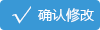
<style>
.page{position:relative;width:100px;height:30px;background:#3998d6}
.page>*{position:absolute;margin:0}
.t1{font:20px "AdobeHeitiStd-Regular";color:#ffffff}
.t2{font:14px "MicrosoftYaHei";color:#ffffff}
</style>
<div class="page">
<p class="t1" style="left:12px;top:6px;width:19px;height:18px">√</p>
<p class="t2" style="left:38px;top:8px;width:56px;height:15px">确认修改</p>
</div>
